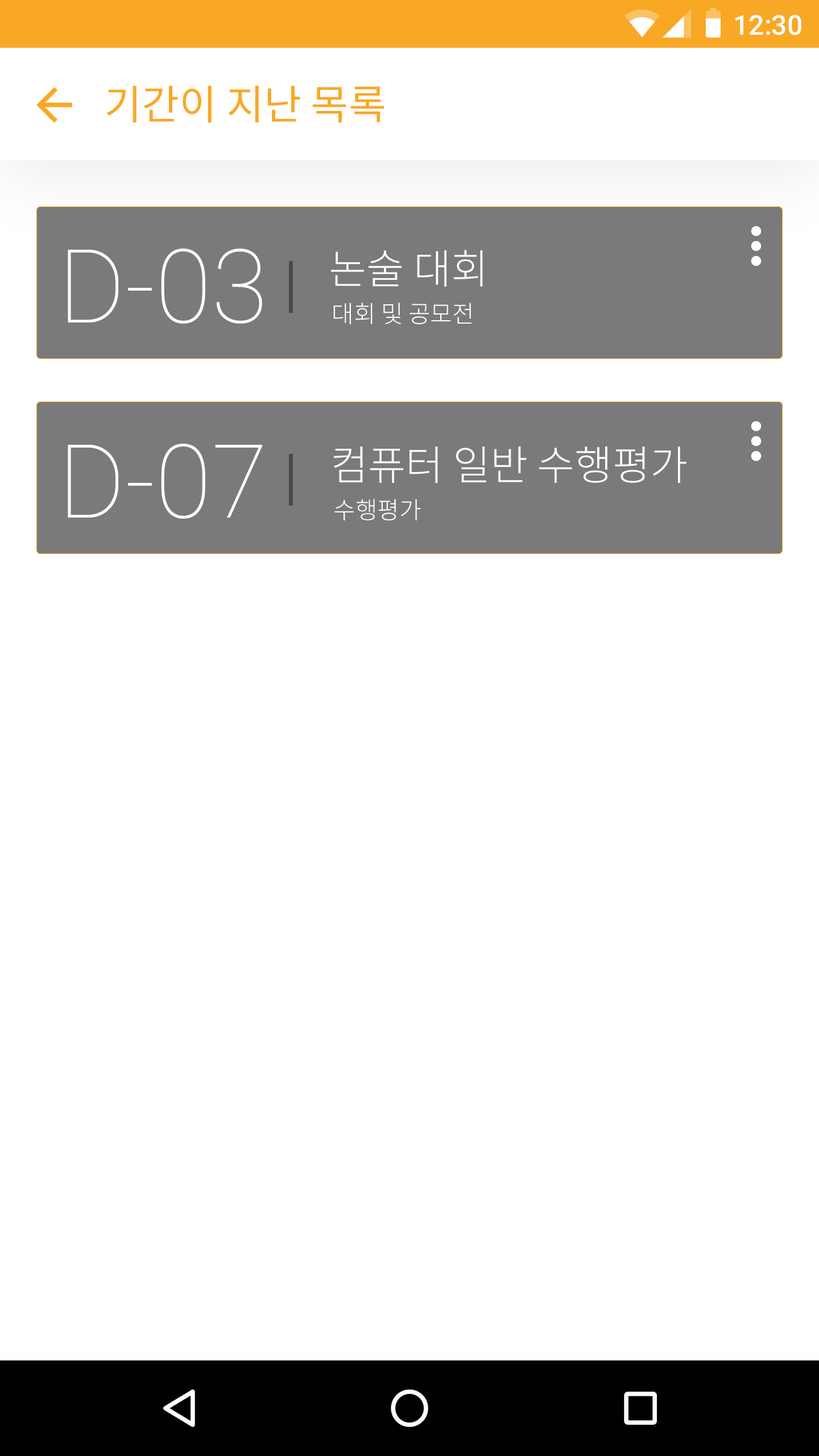
<style>
.page{position:relative;width:819px;height:1456px;background:#ffffff}
.page>*{position:absolute;margin:0}
.t1{font:27.3px "Roboto-Medium";color:#ffffff}
.t2{font:40.9px "NotoSansCJKkr-Regular";color:#f9a825}
.t3{font:102.4px "Roboto-Thin";color:#fffefe}
.t4{font:40.9px "NotoSansCJKkr-Light";color:#fffefe}
.t5{font:23.9px "NotoSansCJKkr-Light";color:#fffefe}
</style>
<div class="page">
<p class="t1" style="left:735px;top:15px;width:66px;height:20px">12:30</p>
<p class="t2" style="left:106px;top:85px;width:278px;height:38px">기간이 지난 목록</p>
<p class="t3" style="left:68px;top:249px;width:194px;height:75px">D-03</p>
<p class="t4" style="left:331px;top:250px;width:152px;height:37px">논술 대회</p>
<p class="t5" style="left:333px;top:303px;width:138px;height:21px">대회 및 공모전</p>
<p class="t3" style="left:68px;top:444px;width:194px;height:75px">D-07</p>
<p class="t4" style="left:333px;top:446px;width:353px;height:37px">컴퓨터 일반 수행평가</p>
<p class="t5" style="left:334px;top:499px;width:87px;height:21px">수행평가</p>
</div>
